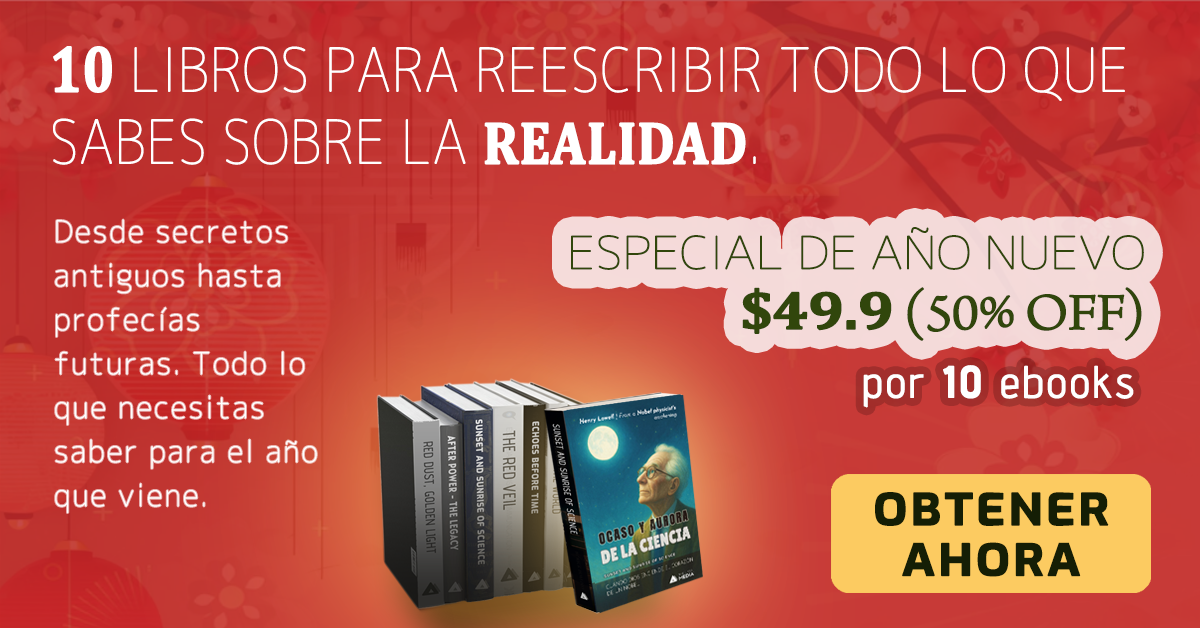
<style>
.page{position:relative;width:1200px;height:628px}
.page>*{position:absolute;margin:0}
.t1{font:60px/72px "Chogokuboso-Gothic";color:#ffffff;font-weight:bold;scale:0.88 1}
.t2{font:66px/72px "Cambria-Bold";color:#ffffff;font-weight:bold;scale:0.8 1}
.t3{font:60px/72px "Cambria-Bold";color:#ffffff;font-weight:bold;scale:0.88 1}
.t4{font:29.7px/44px "Chogokuboso-Gothic";letter-spacing:0.05em;color:#ffffff;font-weight:bold}
.t5{font:45px/60px "Chogokuboso-Gothic";letter-spacing:-0.025em;color:#31460c;font-weight:bold;scale:1.11 1}
.t6{font:54px/60px "Cambria-Bold";letter-spacing:-0.025em;color:#31460c;font-weight:bold;scale:1.11 1}
.t7{font:54px/60px "ArnoPro-LightDisplay";letter-spacing:-0.025em;color:#31460c;font-weight:bold;scale:1.11 1}
.t8{font:44px "AdventPro-Regular";letter-spacing:0.05em;color:#ffffff;font-weight:bold}
.t9{font:44px "AdventPro-Bold";letter-spacing:0.05em;color:#ffffff;font-weight:bold}
.t10{font:43.2px/50.5px "Exo-Bold";letter-spacing:0.05em;color:#151e05;font-weight:bold;scale:1.11 1}
</style>
<div class="page">
<p class="t1" style="left:53px;top:46px;width:1072px;height:119px"><span class="t2">10</span> LIBROS PARA REESCRIBIR TODO LO QUE SABES SOBRE LA <span class="t3">REALIDAD</span>.</p>
<p class="t4" style="left:55px;top:219px;width:262px;height:294px">Desde secretos antiguos hasta profecías futuras. Todo lo que necesitas saber para el año que viene.</p>
<p class="t5" style="left:571px;top:227px;width:573px;height:114px;text-align:right">ESPECIAL DE AÑO NUEVO<br><span class="t6">$49.9</span><span class="t7"> (50% OFF)</span></p>
<p class="t8" style="left:863px;top:365px;width:271px;height:43px">por <span class="t9">10</span> ebooks</p>
<p class="t10" style="left:875px;top:492px;width:234px;height:85px;text-align:center">OBTENER AHORA</p>
</div>
